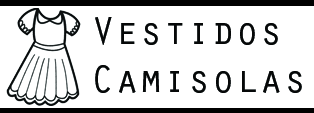
<style>
.page{position:relative;width:314px;height:113px;background:#ffffff}
.page>*{position:absolute;margin:0}
.t1{font:40px "OratorStd";color:#060808}
</style>
<div class="page">
<p class="t1" style="left:95px;top:17px;width:207px;height:76px">Vestidos<br>Camisolas</p>
</div>
